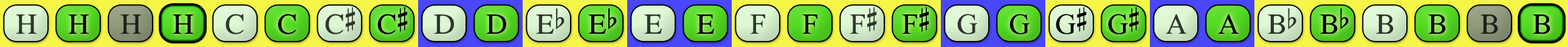
<style>
.page{position:relative;width:1568px;height:47px}
.page>*{position:absolute;margin:0}
.t1{font:29.2px "OpusChords";color:#30352d}
.t2{font:29.2px "OpusChords";color:#000000}
.t3{font:29.2px "OpusChords";color:#1f211b}
.t4{font:29.2px "OpusChords";color:#30362e}
.t5{font:29.2px "OpusChords";color:#2f352d}
.t6{font:29.2px "OpusChords";letter-spacing:-0.025em;color:#000000}
</style>
<div class="page">
<p class="t1" style="left:16px;top:15px;width:20px;height:19px">H</p>
<p class="t2" style="left:68px;top:15px;width:21px;height:19px">H</p>
<p class="t3" style="left:120px;top:15px;width:21px;height:19px">H</p>
<p class="t2" style="left:173px;top:15px;width:20px;height:19px">H</p>
<p class="t4" style="left:225px;top:14px;width:19px;height:21px">C</p>
<p class="t2" style="left:278px;top:14px;width:18px;height:21px">C</p>
<p class="t5" style="left:325px;top:7px;width:30px;height:28px">C#</p>
<p class="t2" style="left:377px;top:7px;width:30px;height:28px">C#</p>
<p class="t5" style="left:434px;top:15px;width:20px;height:19px">D</p>
<p class="t2" style="left:486px;top:15px;width:20px;height:19px">D</p>
<p class="t1" style="left:536px;top:9px;width:29px;height:25px">Eb</p>
<p class="t2" style="left:588px;top:9px;width:29px;height:25px">Eb</p>
<p class="t4" style="left:644px;top:15px;width:18px;height:19px">E</p>
<p class="t2" style="left:696px;top:15px;width:18px;height:19px">E</p>
<p class="t4" style="left:750px;top:15px;width:15px;height:19px">F</p>
<p class="t2" style="left:802px;top:15px;width:15px;height:19px">F</p>
<p class="t1" style="left:850px;top:7px;width:27px;height:27px">F#</p>
<p class="t2" style="left:902px;top:7px;width:27px;height:27px">F#</p>
<p class="t5" style="left:957px;top:14px;width:20px;height:21px">G</p>
<p class="t2" style="left:1009px;top:14px;width:21px;height:21px">G</p>
<p class="t6" style="left:1056px;top:7px;width:31px;height:28px">G#</p>
<p class="t6" style="left:1108px;top:7px;width:31px;height:28px">G#</p>
<p class="t5" style="left:1166px;top:14px;width:20px;height:20px">A</p>
<p class="t2" style="left:1218px;top:14px;width:21px;height:20px">A</p>
<p class="t1" style="left:1268px;top:9px;width:28px;height:25px">Bb</p>
<p class="t2" style="left:1320px;top:9px;width:29px;height:25px">Bb</p>
<p class="t1" style="left:1376px;top:15px;width:18px;height:19px">B</p>
<p class="t2" style="left:1428px;top:15px;width:18px;height:19px">B</p>
<p class="t3" style="left:1480px;top:15px;width:18px;height:19px">B</p>
<p class="t2" style="left:1533px;top:15px;width:17px;height:19px">B</p>
</div>
